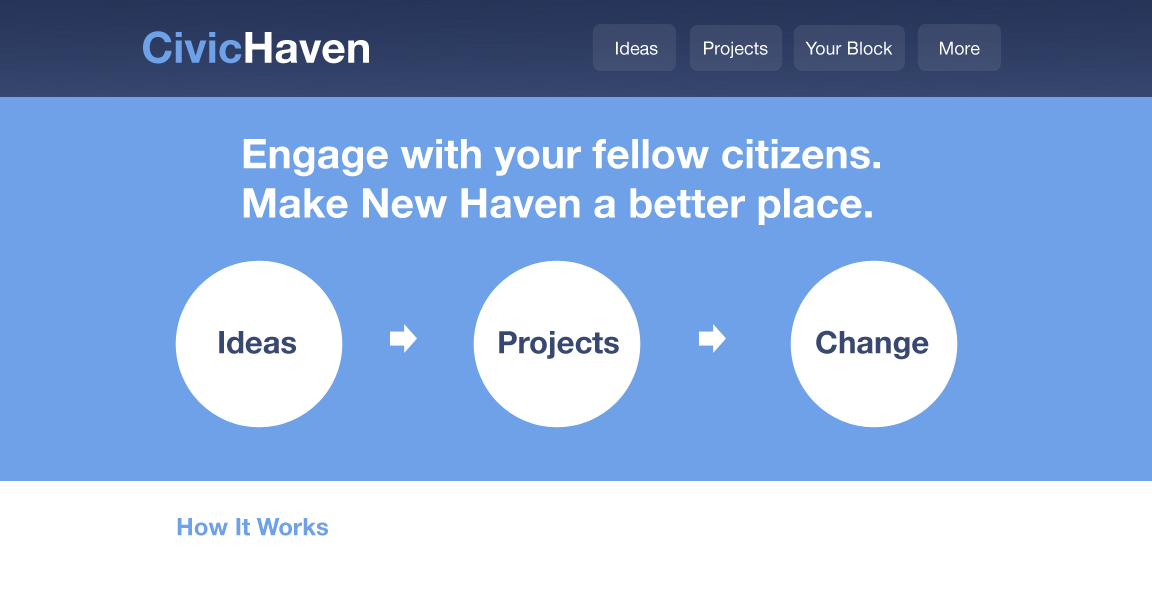
<style>
.page{position:relative;width:1152px;height:600px;background:#6ea1e7}
.page>*{position:absolute;margin:0}
.t1{font:43px "HelveticaNeue-Bold";color:#6ea1e7}
.t2{font:43px "HelveticaNeue-Bold";color:#ffffff}
.t3{font:18px "HelveticaNeue";color:#fefefe}
.t4{font:41px "HelveticaNeue-Bold";color:#ffffff}
.t5{font:31px "HelveticaNeue-Bold";color:#384870}
.t6{font:24px "HelveticaNeue-Bold";color:#6ea1e7}
</style>
<div class="page">
<p class="t1" style="left:143px;top:31px;width:226px;height:33px">Civic<span class="t2">Haven</span></p>
<p class="t3" style="left:616px;top:41px;width:42px;height:14px">Ideas</p>
<p class="t3" style="left:704px;top:41px;width:64px;height:17px">Projects</p>
<p class="t3" style="left:805px;top:41px;width:88px;height:14px">Your Block</p>
<p class="t3" style="left:940px;top:41px;width:40px;height:14px">More</p>
<p class="t4" style="left:243px;top:139px;width:637px;height:86px">Engage with your fellow citizens.<br>Make New Haven a better place.</p>
<p class="t5" style="left:219px;top:331px;width:77px;height:23px">Ideas</p>
<p class="t5" style="left:499px;top:331px;width:120px;height:28px">Projects</p>
<p class="t5" style="left:816px;top:330px;width:113px;height:30px">Change</p>
<p class="t6" style="left:177px;top:518px;width:151px;height:18px">How It Works</p>
</div>
